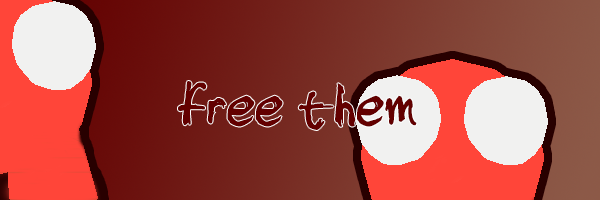
<style>
.page{position:relative;width:600px;height:200px}
.page>*{position:absolute;margin:0}
.t1{font:60px "Sketchy";color:#630000}
</style>
<div class="page">
<p class="t1" style="left:178px;top:81px;width:239px;height:49px">free them</p>
</div>
